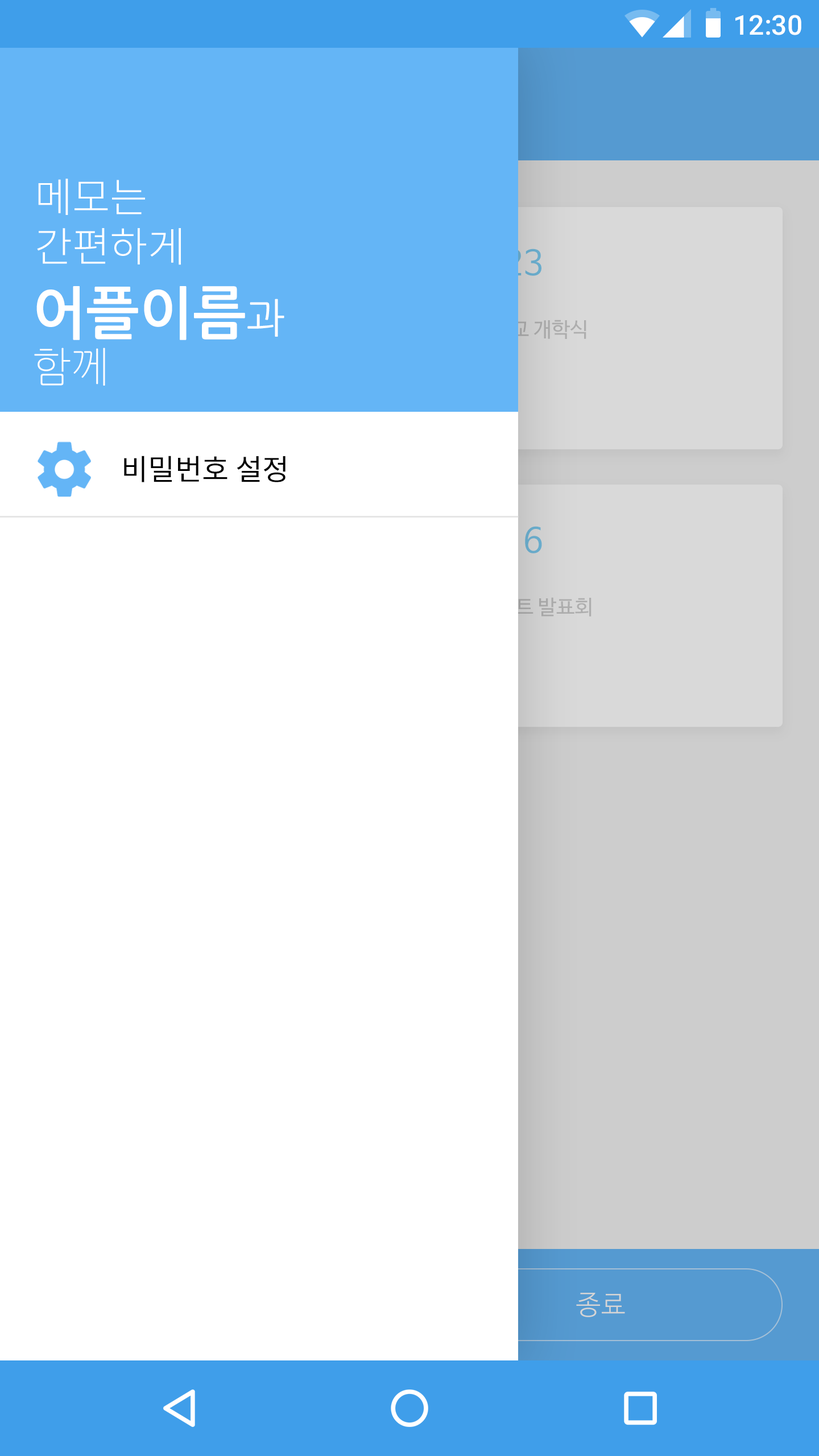
<style>
.page{position:relative;width:819px;height:1456px;background:#ffffff}
.page>*{position:absolute;margin:0}
.t1{font:27.3px "Roboto-Medium";color:#ffffff}
.t2{font:40.9px "NotoSansCJKkr-Light";color:#ffffff}
.t3{font:56.9px "NanumGothicBold";color:#ffffff}
.t4{font:40.9px "NanumGothic";color:#ffffff}
.t5{font:40.9px "NanumGothicLight";color:#ffffff}
.t6{font:29.2px "NotoSansCJKkr-Regular";color:#000000}
</style>
<div class="page">
<p class="t1" style="left:735px;top:15px;width:66px;height:20px">12:30</p>
<p class="t2" style="left:37px;top:179px;width:144px;height:86px">메모는<br>간편하게</p>
<p class="t3" style="left:34px;top:286px;width:250px;height:100px">어플이름<span class="t4">과<br></span><span class="t5">함께</span></p>
<p class="t6" style="left:124px;top:456px;width:162px;height:26px">비밀번호 설정</p>
</div>
